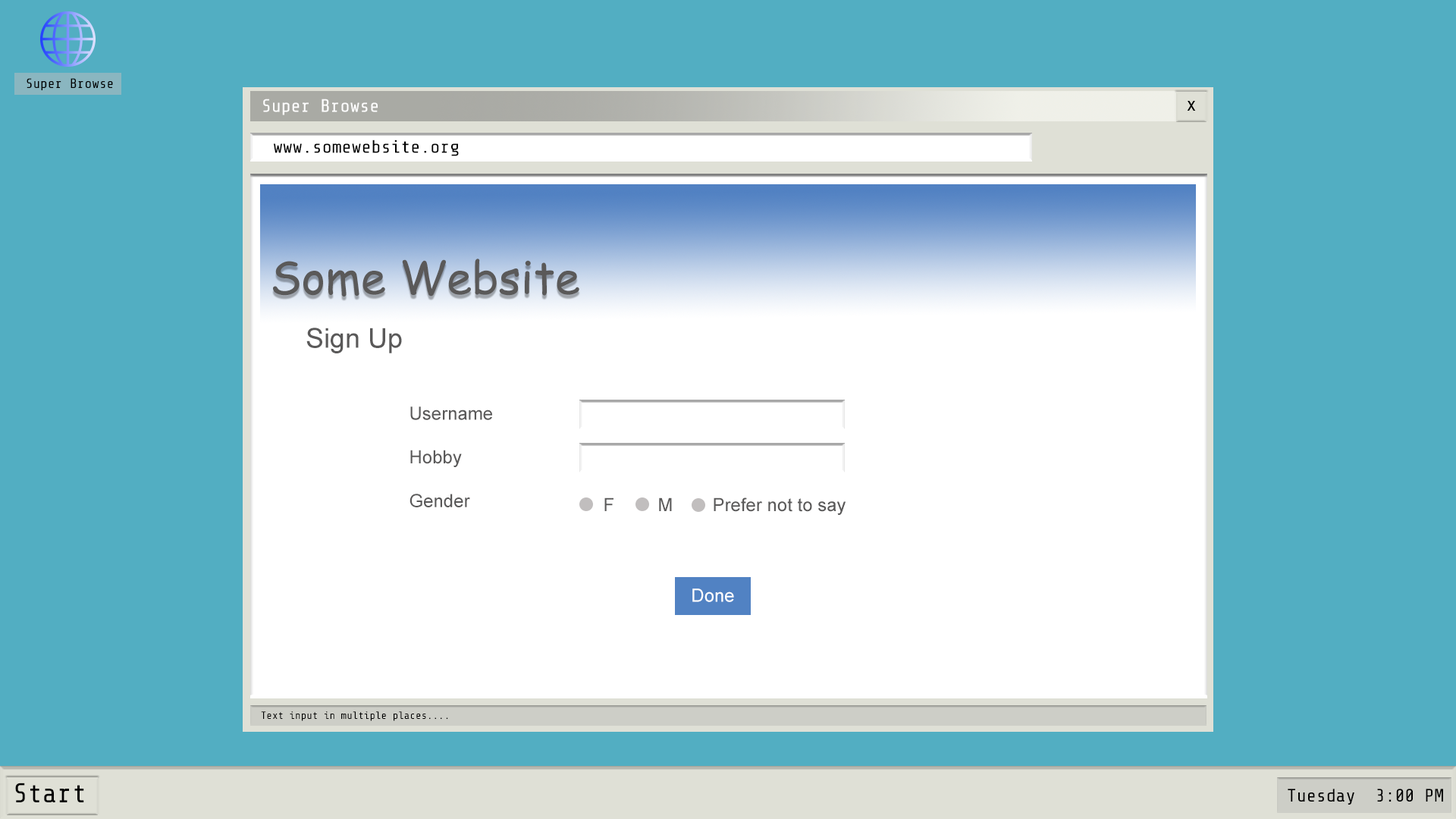
<style>
.page{position:relative;width:1456px;height:819px;background:#52aec2}
.page>*{position:absolute;margin:0}
.t1{font:13.6px "ShareTechMono-Regular";color:#000000}
.t2{font:18.2px "ShareTechMono-Regular";color:#ffffff}
.t3{font:19.6px "ShareTechMono-Regular";color:#000000}
.t4{font:18.2px "ShareTechMono-Regular";color:#000000}
.t5{font:45.5px "ComicSansMS";color:#5a5959}
.t6{font:27.3px "ArialMT";color:#5a5959}
.t7{font:18.2px "ArialMT";color:#5a5959}
.t8{font:18.2px "ArialMT";color:#ffffff}
.t9{font:10.6px "ShareTechMono-Regular";color:#000000}
.t10{font:27.3px "ShareTechMono-Regular";color:#000000}
</style>
<div class="page">
<p class="t1" style="left:27px;top:78px;width:86px;height:12px">Super Browse</p>
<p class="t2" style="left:263px;top:99px;width:115px;height:16px">Super Browse</p>
<p class="t3" style="left:1187px;top:101px;width:9px;height:10px">x</p>
<p class="t4" style="left:273px;top:140px;width:186px;height:16px">www.somewebsite.org</p>
<p class="t5" style="left:273px;top:259px;width:306px;height:38px">Some Website</p>
<p class="t6" style="left:306px;top:328px;width:96px;height:25px">Sign Up</p>
<p class="t7" style="left:409px;top:406px;width:83px;height:101px">Username<br><br>Hobby<br><br>Gender</p>
<p class="t7" style="left:604px;top:497px;width:242px;height:18px">F  M  Prefer not to say</p>
<p class="t8" style="left:692px;top:588px;width:42px;height:14px">Done</p>
<p class="t9" style="left:261px;top:711px;width:187px;height:10px">Text input in multiple places....</p>
<p class="t10" style="left:15px;top:783px;width:69px;height:19px">Start</p>
<p class="t4" style="left:1288px;top:789px;width:155px;height:16px">Tuesday  3:00 PM</p>
</div>
